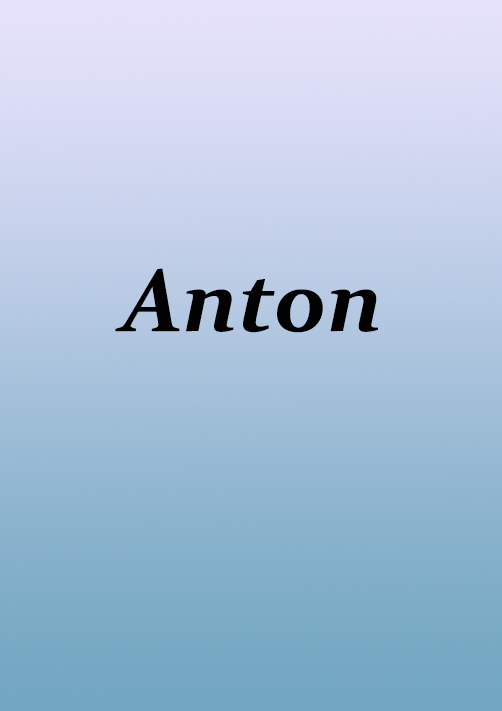
<style>
.page{position:relative;width:502px;height:711px}
.page>*{position:absolute;margin:0}
.t1{font:90px "Constantia-BoldItalic";color:#010101}
</style>
<div class="page">
<p class="t1" style="left:115px;top:268px;width:263px;height:65px">Anton</p>
</div>
